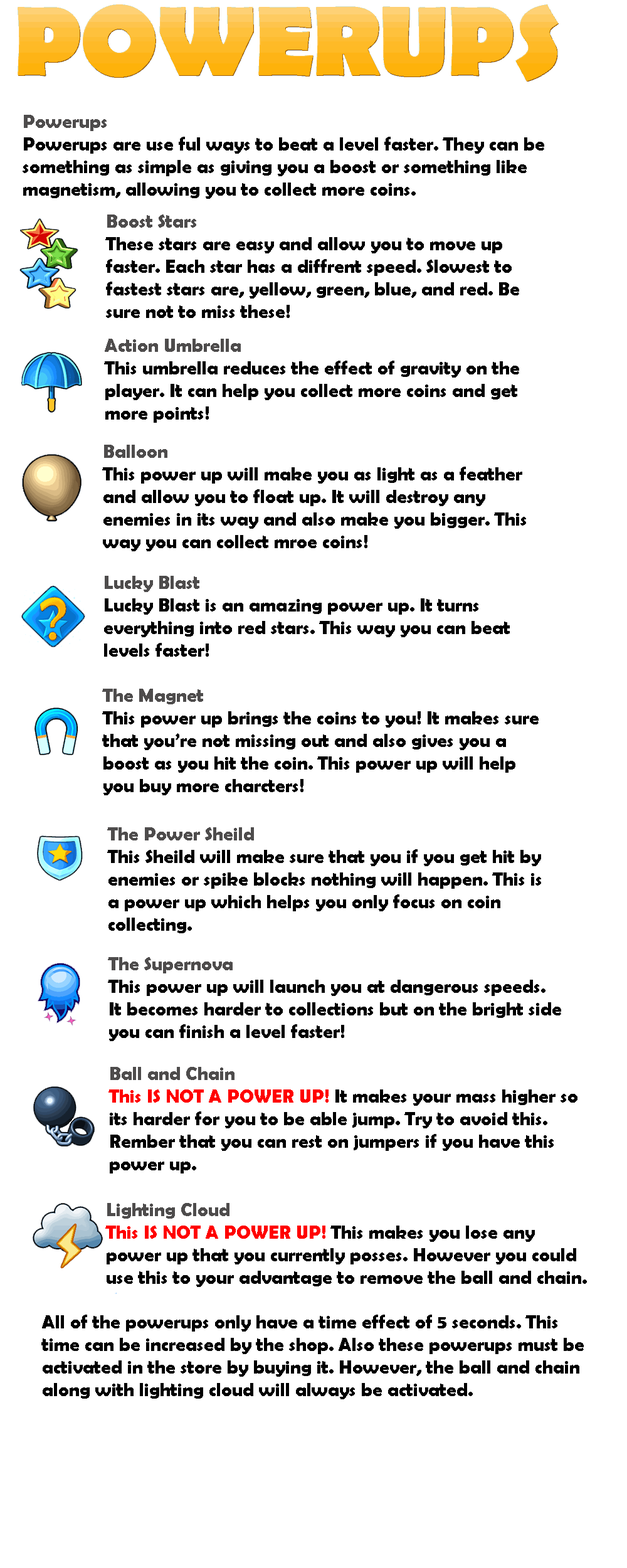
<style>
.page{position:relative;width:627px;height:1568px;background:#ffffff}
.page>*{position:absolute;margin:0}
.t1{font:18.8px "BerlinSansFBDemi-Bold";color:#000000}
.t2{font:18.8px "BerlinSansFBDemi-Bold";color:#4e4c4c}
.t3{font:18.8px "BerlinSansFBDemi-Bold";color:#ff0000}
</style>
<div class="page">
<p class="t1" style="left:23px;top:115px;width:521px;height:84px"><span class="t2">Powerups<br></span>Powerups are use ful ways to beat a level faster. They can be something as simple as giving you a boost or something like magnetism, allowing you to collect more coins.</p>
<p class="t1" style="left:105px;top:215px;width:414px;height:103px"><span class="t2">Boost Stars<br></span>These stars are easy and allow you to move up faster. Each star has a diffrent speed. Slowest to fastest stars are, yellow, green, blue, and red. Be sure not to miss these!</p>
<p class="t1" style="left:104px;top:339px;width:415px;height:84px"><span class="t2">Action Umbrella<br></span>This umbrella reduces the effect of gravity on the player. It can help you collect more coins and get more points!</p>
<p class="t1" style="left:102px;top:445px;width:424px;height:106px"><span class="t2">Balloon<br></span>This power up will make you as light as a feather and allow you to float up. It will destroy any enemies in its way and also make you bigger. This way you can collect mroe coins!</p>
<p class="t1" style="left:104px;top:576px;width:406px;height:81px"><span class="t2">Lucky Blast<br></span>Lucky Blast is an amazing power up. It turns everything into red stars. This way you can beat levels faster!</p>
<p class="t1" style="left:102px;top:689px;width:437px;height:106px"><span class="t2">The Magnet<br></span>This power up brings the coins to you! It makes sure that you’re not missing out and also gives you a boost as you hit the coin. This power up will help you buy more charcters!</p>
<p class="t1" style="left:107px;top:827px;width:434px;height:106px"><span class="t2">The Power Sheild<br></span>This Sheild will make sure that you if you get hit by enemies or spike blocks nothing will happen. This is a power up which helps you only focus on coin collecting.</p>
<p class="t1" style="left:108px;top:957px;width:453px;height:84px"><span class="t2">The Supernova<br></span>This power up will launch you at dangerous speeds. It becomes harder to collections but on the bright side you can finish a level faster!</p>
<p class="t1" style="left:109px;top:1067px;width:469px;height:106px"><span class="t2">Ball and Chain<br></span><span class="t3">This IS NOT A POWER UP!</span> It makes your mass higher so its harder for you to be able jump. Try to avoid this. Rember that you can rest on jumpers if you have this power up.</p>
<p class="t1" style="left:105px;top:1203px;width:482px;height:84px"><span class="t2">Lighting Cloud<br></span><span class="t3">This IS NOT A POWER UP!</span> This makes you lose any power up that you currently posses. However you could use this to your advantage to remove the ball and chain.</p>
<p class="t1" style="left:41px;top:1315px;width:543px;height:84px">All of the powerups only have a time effect of 5 seconds. This time can be increased by the shop. Also these powerups must be activated in the store by buying it. However, the ball and chain along with lighting cloud will always be activated.</p>
</div>
